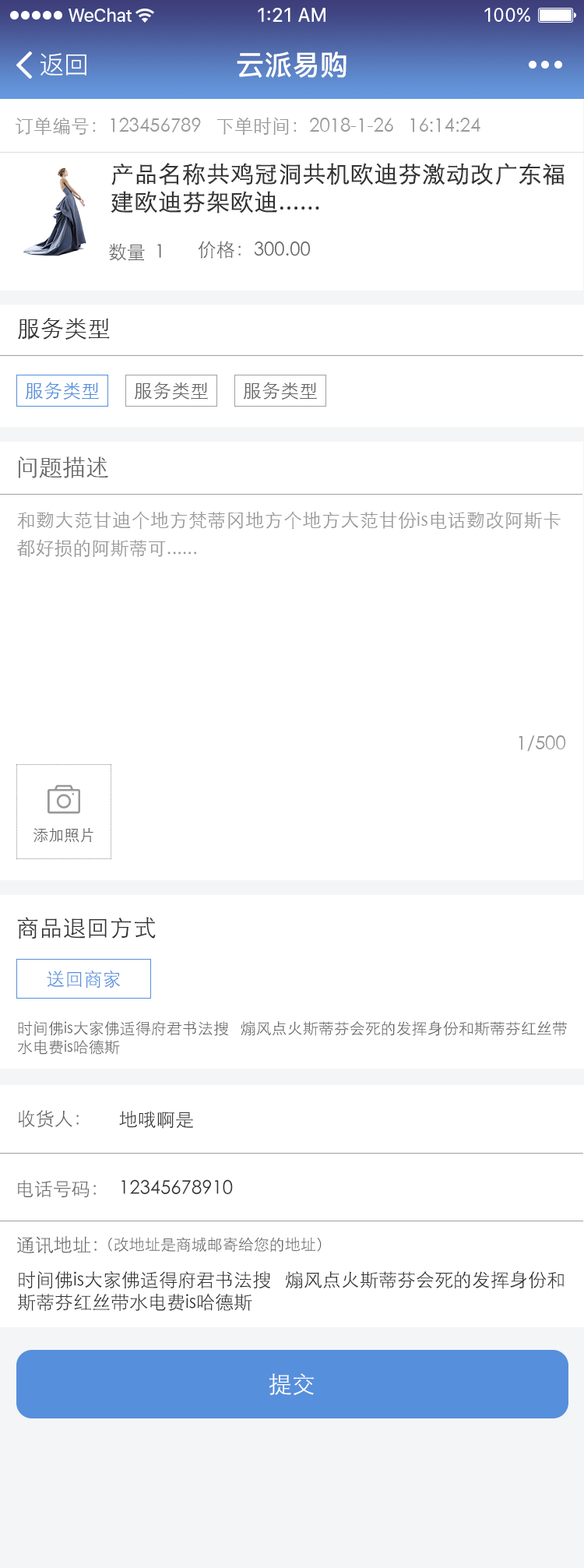
<style>
.page{position:relative;width:584px;height:1568px;background:#ffffff}
.page>*{position:absolute;margin:0}
.t1{font:24.9px "PingFang-SC-Regular";color:#ffffff}
.t2{font:28px "PingFang-SC-Bold";color:#ffffff}
.t3{font:18.7px "STXihei";color:#999999}
.t4{font:23.4px "STXihei";color:#333333;font-weight:bold}
.t5{font:18.7px "STXihei";color:#666666}
.t6{font:23.4px "STXihei";color:#333333}
.t7{font:18.7px "STXihei";color:#568fdc}
.t8{font:23.4px "STXihei";color:#666666}
.t9{font:18.7px/28px "STXihei";color:#999999}
.t10{font:15.6px "STXihei";color:#666666}
.t11{font:18.7px "STXihei";color:#333333}
.t12{font:23.4px "STXihei";color:#ffffff}
</style>
<div class="page">
<p class="t1" style="left:41px;top:53px;width:45px;height:23px">返回</p>
<p class="t2" style="left:237px;top:51px;width:110px;height:27px">云派易购</p>
<p class="t3" style="left:16px;top:118px;width:185px;height:17px">订单编号：123456789</p>
<p class="t3" style="left:217px;top:118px;width:264px;height:17px">下单时间：2018-1-26   16:14:24</p>
<p class="t4" style="left:111px;top:163px;width:454px;height:50px">产品名称共鸡冠洞共机欧迪芬激动改广东福建欧迪芬架欧迪......</p>
<p class="t5" style="left:109px;top:243px;width:52px;height:18px">数量  1</p>
<p class="t5" style="left:198px;top:241px;width:112px;height:18px">价格：300.00</p>
<p class="t6" style="left:18px;top:318px;width:92px;height:22px">服务类型</p>
<p class="t7" style="left:25px;top:382px;width:74px;height:18px">服务类型</p>
<p class="t5" style="left:134px;top:382px;width:74px;height:18px">服务类型</p>
<p class="t5" style="left:243px;top:382px;width:74px;height:18px">服务类型</p>
<p class="t8" style="left:18px;top:456px;width:90px;height:22px">问题描述</p>
<p class="t9" style="left:17px;top:511px;width:544px;height:46px;text-align:justify">和覅大范甘迪个地方梵蒂冈地方个地方大范甘份is电话覅改阿斯卡都好损的阿斯蒂可......</p>
<p class="t3" style="left:519px;top:735px;width:47px;height:17px">1/500</p>
<p class="t10" style="left:33px;top:828px;width:60px;height:15px">添加照片</p>
<p class="t6" style="left:17px;top:917px;width:139px;height:22px">商品退回方式</p>
<p class="t7" style="left:47px;top:970px;width:73px;height:18px">送回商家</p>
<p class="t10" style="left:17px;top:1021px;width:550px;height:34px">时间佛is大家佛适得府君书法搜   煽风点火斯蒂芬会死的发挥身份和斯蒂芬红丝带水电费is哈德斯</p>
<p class="t5" style="left:18px;top:1110px;width:61px;height:18px">收货人：</p>
<p class="t11" style="left:119px;top:1111px;width:74px;height:18px">地哦啊是</p>
<p class="t5" style="left:18px;top:1180px;width:78px;height:18px">电话号码：</p>
<p class="t11" style="left:122px;top:1179px;width:111px;height:15px">12345678910</p>
<p class="t5" style="left:17px;top:1236px;width:80px;height:17px">通讯地址：</p>
<p class="t10" style="left:108px;top:1237px;width:214px;height:15px">（改地址是商城邮寄给您的地址）</p>
<p class="t11" style="left:18px;top:1270px;width:546px;height:41px">时间佛is大家佛适得府君书法搜   煽风点火斯蒂芬会死的发挥身份和斯蒂芬红丝带水电费is哈德斯</p>
<p class="t12" style="left:270px;top:1373px;width:44px;height:22px">提交</p>
</div>
